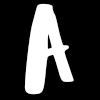
<style>
.page{position:relative;width:100px;height:100px;background:#000000}
.page>*{position:absolute;margin:0}
.t1{font:116.7px "Ludicrous";color:#ffffff}
</style>
<div class="page">
<p class="t1" style="left:24px;top:3px;width:50px;height:92px">A</p>
</div>
